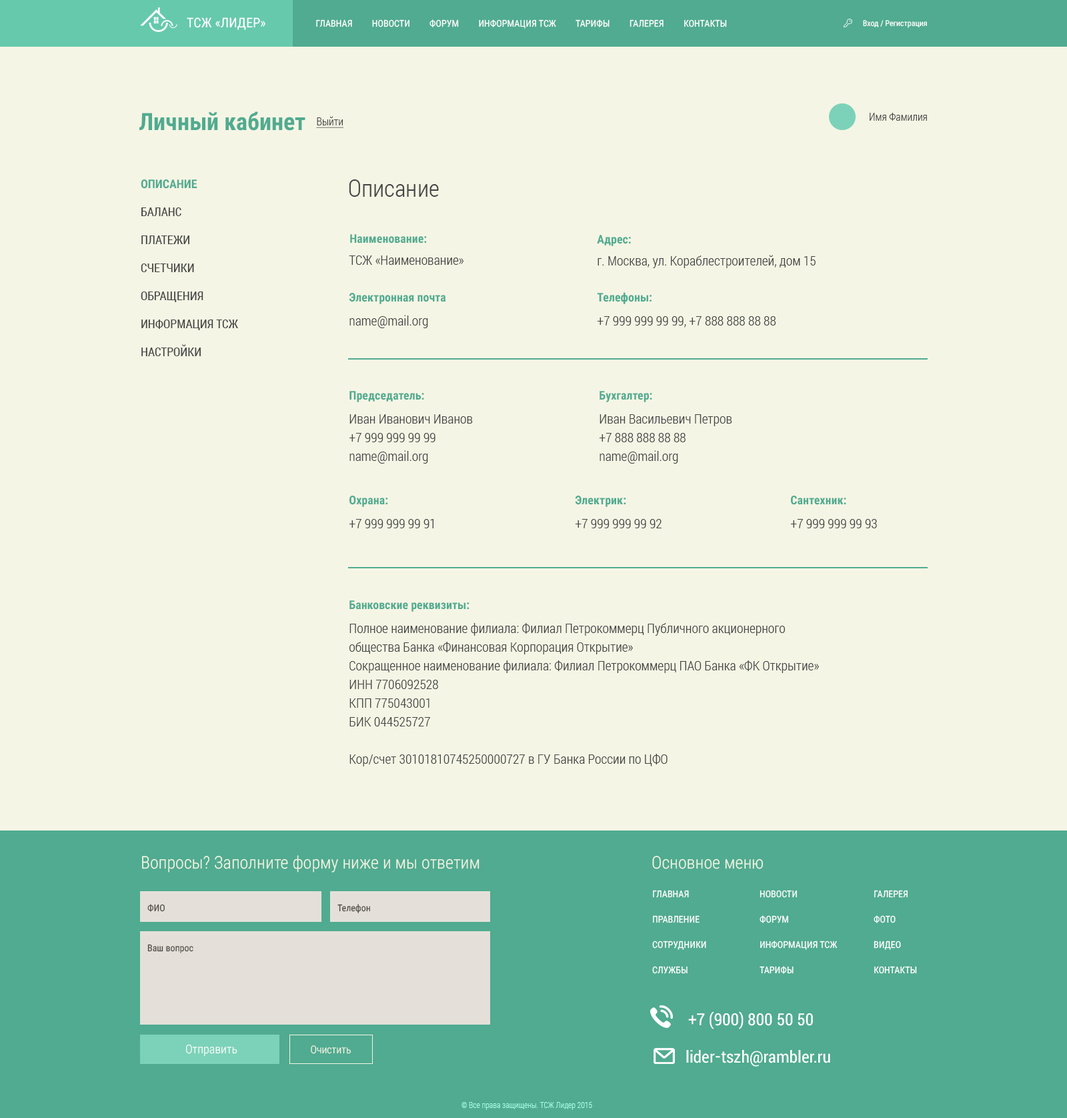
<style>
.page{position:relative;width:1067px;height:1118px;background:#f5f5e5}
.page>*{position:absolute;margin:0}
.t1{font:13.3px "RobotoCondensed-Regular";letter-spacing:0.005em;color:#ffffff}
.t2{font:9.3px "RobotoCondensed-Regular";letter-spacing:0.005em;color:#ffffff}
.t3{font:8px "RobotoCondensed-Regular";color:#ffffff}
.t4{font:24px "RobotoCondensed-Bold";color:#50ab90}
.t5{font:10.7px "RobotoCondensed-Light";color:#454545}
.t6{font:10.7px "RobotoCondensed-Light";color:#454545;text-decoration:underline}
.t7{font:12px/28px "RobotoCondensed-Regular";color:#454545}
.t8{font:12px/28px "RobotoCondensed-Bold";color:#50ab90}
.t9{font:24px "RobotoCondensed-Light";color:#454545}
.t10{font:12px "RobotoCondensed-Bold";color:#50ab90}
.t11{font:13.3px "RobotoCondensed-Light";color:#454545}
.t12{font:13.3px/18.7px "RobotoCondensed-Light";color:#454545}
.t13{font:17.3px "RobotoCondensed-Light";color:#f5f5e5}
.t14{font:9.3px/25.3px "RobotoCondensed-Regular";color:#ffffff}
.t15{font:9.3px "RobotoCondensed-Regular";color:#4c4a46}
.t16{font:17.3px "Roboto-Condensed";color:#ffffff}
.t17{font:12px "RobotoCondensed-Light";color:#ffffff}
.t18{font:10.7px "RobotoCondensed-Light";color:#f5f5e5}
.t19{font:8px "RobotoCondensed-Light";color:#a6fde3}
</style>
<div class="page">
<p class="t1" style="left:187px;top:17px;width:78px;height:13px">ТСЖ «ЛИДЕР»</p>
<p class="t2" style="left:316px;top:19px;width:411px;height:10px">ГЛАВНАЯ         НОВОСТИ         ФОРУМ         ИНФОРМАЦИЯ ТСЖ         ТАРИФЫ         ГАЛЕРЕЯ         КОНТАКТЫ</p>
<p class="t3" style="left:863px;top:20px;width:64px;height:8px">Вход / Регистрация</p>
<p class="t4" style="left:139px;top:111px;width:166px;height:20px">Личный кабинет</p>
<p class="t5" style="left:870px;top:113px;width:57px;height:8px">Имя Фамилия</p>
<p class="t6" style="left:316px;top:116px;width:28px;height:12px">Выйти</p>
<p class="t7" style="left:141px;top:179px;width:97px;height:177px"><span class="t8">ОПИСАНИЕ<br></span>БАЛАНС<br>ПЛАТЕЖИ<br>СЧЕТЧИКИ<br>ОБРАЩЕНИЯ<br>ИНФОРМАЦИЯ ТСЖ<br>НАСТРОЙКИ</p>
<p class="t9" style="left:349px;top:179px;width:90px;height:18px">Описание</p>
<p class="t10" style="left:350px;top:234px;width:77px;height:9px">Наименование:</p>
<p class="t10" style="left:597px;top:235px;width:34px;height:11px">Адрес:</p>
<p class="t11" style="left:349px;top:255px;width:115px;height:10px">ТСЖ «Наименование»</p>
<p class="t11" style="left:597px;top:255px;width:219px;height:13px">г. Москва, ул. Кораблестроителей, дом 15</p>
<p class="t10" style="left:349px;top:293px;width:97px;height:11px">Электронная почта</p>
<p class="t10" style="left:597px;top:292px;width:55px;height:12px">Телефоны:</p>
<p class="t11" style="left:349px;top:315px;width:79px;height:13px">name@mail.org</p>
<p class="t11" style="left:597px;top:316px;width:179px;height:11px">+7 999 999 99 99, +7 888 888 88 88</p>
<p class="t10" style="left:349px;top:391px;width:75px;height:11px">Председатель:</p>
<p class="t10" style="left:599px;top:391px;width:53px;height:11px">Бухгалтер:</p>
<p class="t12" style="left:349px;top:414px;width:124px;height:49px">Иван Иванович Иванов<br>+7 999 999 99 99<br>name@mail.org</p>
<p class="t12" style="left:599px;top:414px;width:133px;height:49px">Иван Васильевич Петров<br>+7 888 888 88 88<br>name@mail.org</p>
<p class="t10" style="left:349px;top:495px;width:39px;height:12px">Охрана:</p>
<p class="t10" style="left:575px;top:495px;width:51px;height:12px">Электрик:</p>
<p class="t10" style="left:791px;top:495px;width:55px;height:10px">Сантехник:</p>
<p class="t11" style="left:349px;top:519px;width:84px;height:9px">+7 999 999 99 91</p>
<p class="t11" style="left:575px;top:519px;width:87px;height:9px">+7 999 999 99 92</p>
<p class="t11" style="left:790px;top:519px;width:87px;height:9px">+7 999 999 99 93</p>
<p class="t10" style="left:349px;top:600px;width:120px;height:11px">Банковские реквизиты:</p>
<p class="t12" style="left:349px;top:623px;width:470px;height:143px">Полное наименование филиала: Филиал Петрокоммерц Публичного акционерного<br>общества Банка «Финансовая Корпорация Открытие»<br>Сокращенное наименование филиала: Филиал Петрокоммерц ПАО Банка «ФК Открытие»<br>ИНН 7706092528<br>КПП 775043001<br>БИК 044525727<br><br>Кор/счет 30101810745250000727 в ГУ Банка России по ЦФО</p>
<p class="t13" style="left:142px;top:855px;width:337px;height:17px">Вопросы? Заполните форму ниже и мы ответим</p>
<p class="t13" style="left:652px;top:856px;width:111px;height:13px">Основное меню</p>
<p class="t14" style="left:652px;top:890px;width:54px;height:84px">ГЛАВНАЯ<br>ПРАВЛЕНИЕ<br>СОТРУДНИКИ<br>СЛУЖБЫ</p>
<p class="t14" style="left:760px;top:890px;width:78px;height:84px">НОВОСТИ<br>ФОРУМ<br>ИНФОРМАЦИЯ ТСЖ<br>ТАРИФЫ</p>
<p class="t14" style="left:874px;top:890px;width:43px;height:84px">ГАЛЕРЕЯ<br>ФОТО<br>ВИДЕО<br>КОНТАКТЫ</p>
<p class="t15" style="left:147px;top:904px;width:18px;height:8px">ФИО</p>
<p class="t15" style="left:337px;top:904px;width:33px;height:9px">Телефон</p>
<p class="t15" style="left:147px;top:944px;width:46px;height:9px">Ваш вопрос</p>
<p class="t16" style="left:688px;top:1011px;width:125px;height:18px">+7 (900) 800 50 50</p>
<p class="t17" style="left:186px;top:1044px;width:51px;height:12px">Отправить</p>
<p class="t18" style="left:311px;top:1045px;width:40px;height:9px">Очистить</p>
<p class="t16" style="left:686px;top:1050px;width:144px;height:16px">lider-tszh@rambler.ru</p>
<p class="t19" style="left:461px;top:1102px;width:131px;height:8px">© Все права защищены. ТСЖ Лидер 2015</p>
</div>
